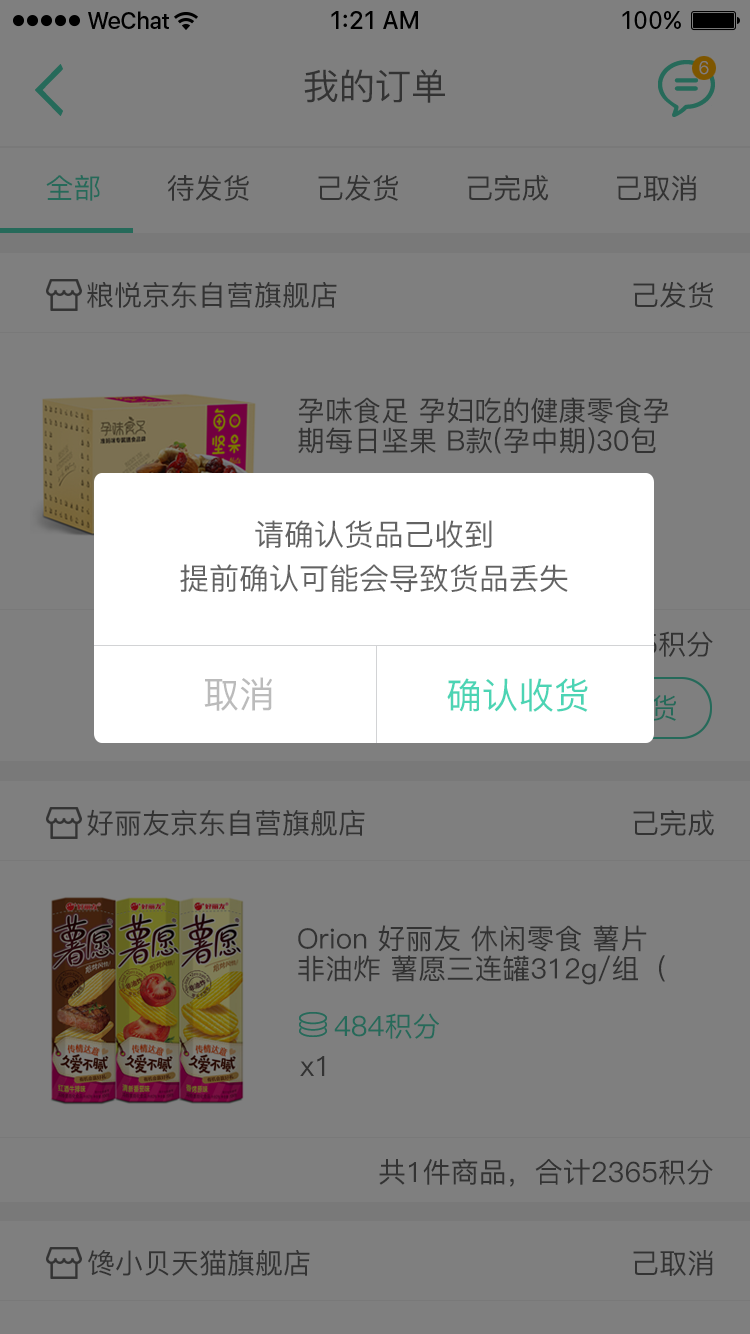
<style>
.page{position:relative;width:750px;height:1334px;background:#7f7f7f}
.page>*{position:absolute;margin:0}
.t1{font:18px "PingFang-SC-Medium";color:#7f7f7f}
.t2{font:36px "PingFang-SC-Medium";color:#333333}
.t3{font:28px "PingFang-SC-Medium";color:#333333}
.t4{font:28px/30px "PingFang-SC-Medium";color:#333333}
.t5{font:30px/48px "PingFang-SC-Medium";color:#636363}
.t6{font:36px "PingFang-SC-Medium";color:#bbbbbb}
.t7{font:36px "PingFang-SC-Medium";color:#4cd4b4}
.t8{font:28px "PingFang-SC-Medium";color:#266a5a}
</style>
<div class="page">
<p class="t1" style="left:699px;top:61px;width:10px;height:14px">6</p>
<p class="t2" style="left:304px;top:69px;width:141px;height:34px">我的订单</p>
<p class="t3" style="left:46px;top:175px;width:651px;height:26px">全部       待发货       己发货       己完成       己取消</p>
<p class="t3" style="left:87px;top:282px;width:250px;height:26px">粮悦京东自营旗舰店</p>
<p class="t3" style="left:633px;top:282px;width:80px;height:26px">己发货</p>
<p class="t4" style="left:298px;top:397px;width:371px;height:57px">孕味食足 孕妇吃的健康零食孕期每日坚果 B款(孕中期)30包</p>
<p class="t5" style="left:180px;top:520px;width:388px;height:72px;text-align:center">请确认货品己收到<br>提前确认可能会导致货品丢失</p>
<p class="t6" style="left:204px;top:677px;width:68px;height:34px">取消</p>
<p class="t7" style="left:447px;top:678px;width:141px;height:34px">确认收货</p>
<p class="t3" style="left:87px;top:809px;width:278px;height:27px">好丽友京东自营旗舰店</p>
<p class="t3" style="left:633px;top:810px;width:81px;height:26px">己完成</p>
<p class="t4" style="left:298px;top:925px;width:367px;height:60px">Orion 好丽友 休闲零食 薯片 非油炸 薯愿三连罐312g/组（104g*3薯片）</p>
<p class="t8" style="left:334px;top:1013px;width:105px;height:26px">484积分</p>
<p class="t3" style="left:300px;top:1056px;width:25px;height:20px">x1</p>
<p class="t3" style="left:379px;top:1158px;width:334px;height:29px">共1件商品，合计2365积分</p>
<p class="t3" style="left:88px;top:1250px;width:222px;height:26px">馋小贝天猫旗舰店</p>
<p class="t3" style="left:633px;top:1250px;width:80px;height:26px">己取消</p>
</div>
